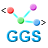
<style>
.page{position:relative;width:48px;height:48px;background:#ffffff}
.page>*{position:absolute;margin:0}
.t1{font:9.4px "CourierNewPSMT"}
.t2{font:16px "Arial-BoldMT"}
</style>
<div class="page">
<p class="t1" style="left:1px;top:8px;width:5px;height:5px">&lt;</p>
<p class="t2" style="left:6px;top:30px;width:35px;height:12px">GGS</p>
<p class="t1" style="left:41px;top:20px;width:5px;height:5px">&gt;</p>
</div>
